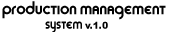
<style>
.page{position:relative;width:169px;height:32px;background:#ffffff}
.page>*{position:absolute;margin:0}
.t1{font:19.4px "SansSara";color:#030303}
.t2{font:16.6px "SansSara";color:#030303;scale:0.96 1}
.t3{font:9.5px "Arial-Black";color:#030303;scale:0.96 1}
</style>
<div class="page">
<p class="t1" style="left:2px;top:1px;width:164px;height:19px">Production Management</p>
<p class="t2" style="left:45px;top:21px;width:63px;height:12px">System <span class="t3">v.1.0</span></p>
</div>
